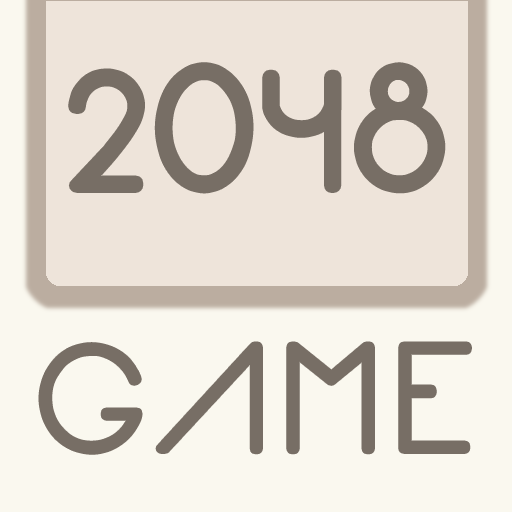
<style>
.page{position:relative;width:512px;height:512px;background:#faf8ef}
.page>*{position:absolute;margin:0}
.t1{font:120px "Arual";letter-spacing:0.1em;color:#776e65}
.t2{font:144px "Arual";letter-spacing:0.1em;color:#776e65}
</style>
<div class="page">
<p class="t1" style="left:75px;top:69px;width:364px;height:118px">2048</p>
<p class="t2" style="left:43px;top:346px;width:424px;height:104px">GAME</p>
</div>
